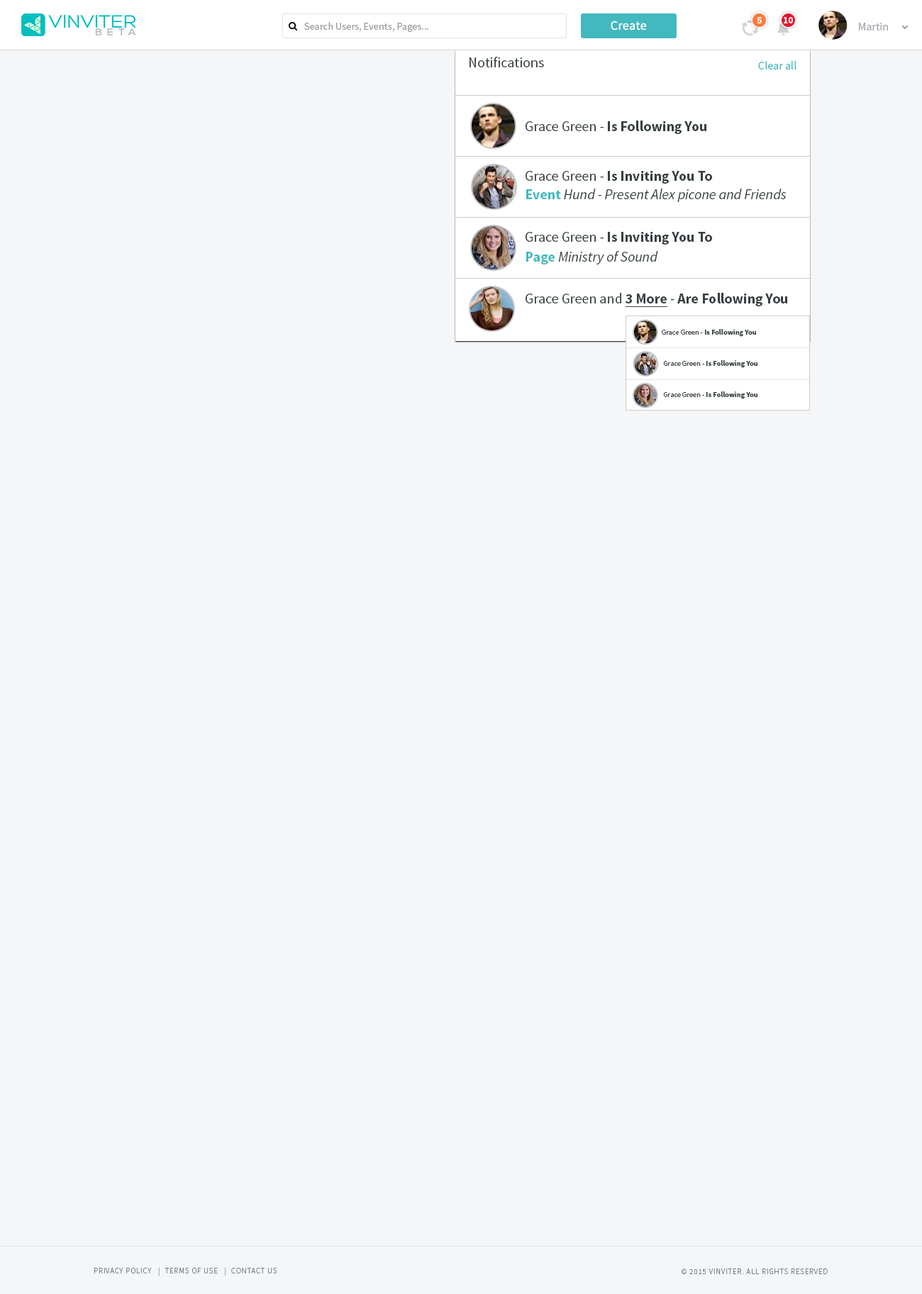
<style>
.page{position:relative;width:922px;height:1294px;background:#f5f6f7}
.page>*{position:absolute;margin:0}
.t1{font:9.2px "SourceSansPro-Bold";color:#ffffff}
.t2{font:10.2px "SourceSansPro-Regular";color:#999999}
.t3{font:12.8px "SourceSansPro-Regular";letter-spacing:0.02em;color:#ffffff}
.t4{font:11.3px "SourceSansPro-Regular";color:#a3a6ae}
.t5{font:14.2px "SourceSansPro-Regular";color:#363f41}
.t6{font:11.3px "SourceSansPro-Regular";color:#42b9be}
.t7{font:14.2px "SourceSansPro-Bold";color:#363f41}
.t8{font:14.2px "SourceSansPro-It";color:#363f41}
.t9{font:14.2px "SourceSansPro-Bold";color:#42b9be}
.t10{font:14.2px "SourceSansPro-Bold";color:#363f41;text-decoration:underline}
.t11{font:7.4px "SourceSansPro-Bold";color:#363f41}
.t12{font:7.4px "SourceSansPro-Regular";color:#363f41}
.t13{font:7.8px "SourceSansPro-Light";letter-spacing:0.075em;color:#747a85;text-transform:uppercase}
</style>
<div class="page">
<p class="t1" style="left:756px;top:17px;width:5px;height:6px">5</p>
<p class="t1" style="left:783px;top:17px;width:10px;height:6px">10</p>
<p class="t2" style="left:304px;top:22px;width:124px;height:11px">Search Users, Events, Pages...</p>
<p class="t3" style="left:610px;top:21px;width:37px;height:9px">Create</p>
<p class="t4" style="left:859px;top:23px;width:29px;height:7px">Martin</p>
<p class="t5" style="left:469px;top:57px;width:75px;height:10px">Notifications</p>
<p class="t6" style="left:758px;top:61px;width:38px;height:8px">Clear all</p>
<p class="t7" style="left:525px;top:121px;width:181px;height:13px"><span class="t5">Grace Green - </span>Is Following You</p>
<p class="t7" style="left:525px;top:171px;width:187px;height:13px"><span class="t5">Grace Green - </span>Is Inviting You To</p>
<p class="t8" style="left:526px;top:189px;width:260px;height:13px"><span class="t9">Event</span> Hund - Present Alex picone and Friends</p>
<p class="t7" style="left:525px;top:232px;width:187px;height:13px"><span class="t5">Grace Green - </span>Is Inviting You To</p>
<p class="t8" style="left:526px;top:251px;width:132px;height:13px"><span class="t9">Page</span> Ministry of Sound</p>
<p class="t7" style="left:525px;top:293px;width:262px;height:14px"><span class="t5">Grace Green and </span><span class="t10">3 More</span><span class="t5"> - </span>Are Following You</p>
<p class="t11" style="left:661px;top:329px;width:95px;height:8px"><span class="t12">Grace Green - </span>Is Following You</p>
<p class="t11" style="left:663px;top:360px;width:94px;height:8px"><span class="t12">Grace Green - </span>Is Following You</p>
<p class="t11" style="left:663px;top:391px;width:94px;height:8px"><span class="t12">Grace Green - </span>Is Following You</p>
<p class="t13" style="left:94px;top:1267px;width:183px;height:8px">Privacy Policy   |  Terms of Use   |  Contact us</p>
<p class="t13" style="left:681px;top:1268px;width:146px;height:6px">© 2015 VINVITER. All rights reserved</p>
</div>
